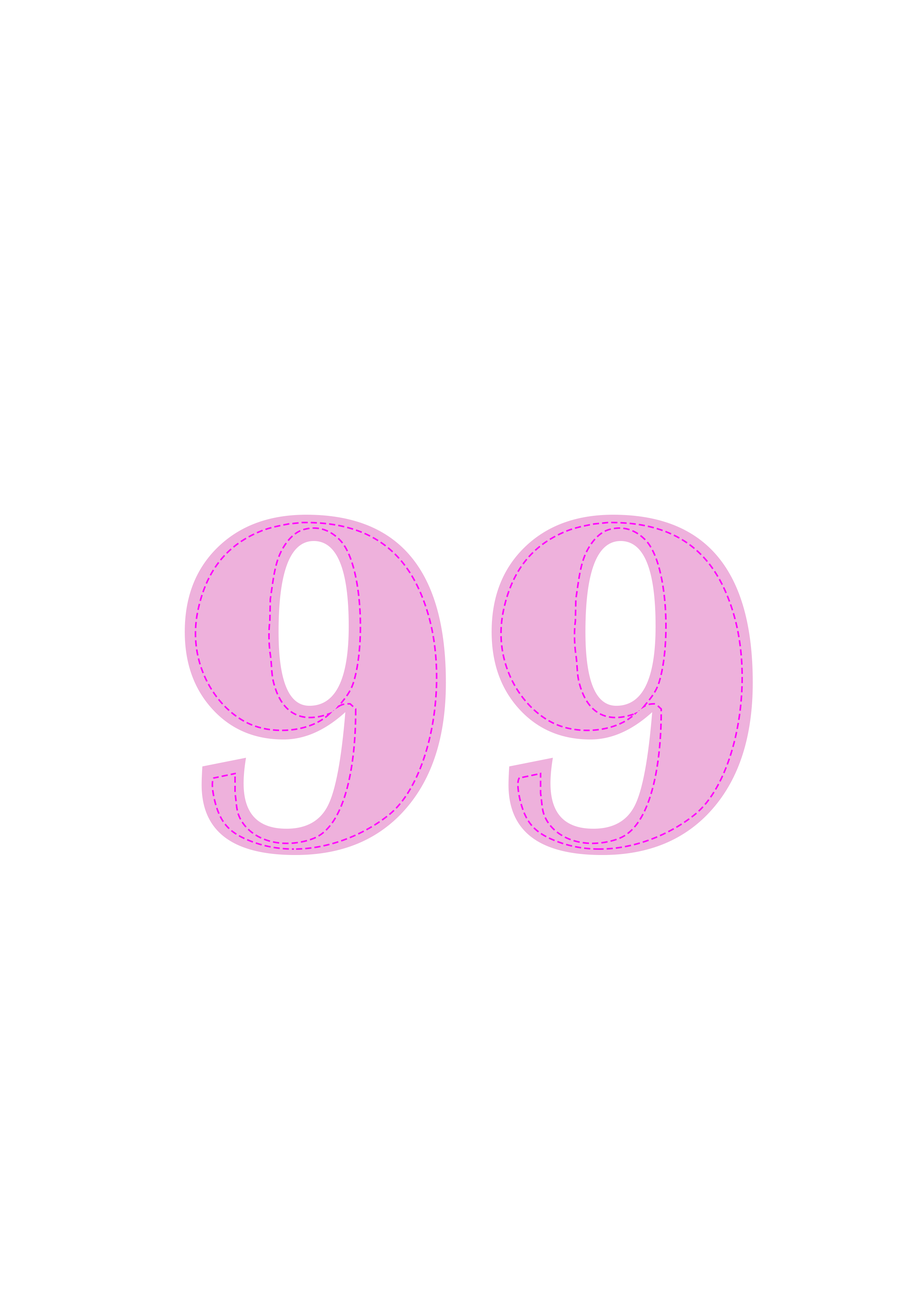
<style>
.page{position:relative;width:918px;height:1299px;background:#ffffff}
.page>*{position:absolute;margin:0}
.t1{font:493.7px "BritannicBold";letter-spacing:0.01em;color:#eeb1dc}
</style>
<div class="page">
<p class="t1" style="left:185px;top:515px;width:568px;height:340px">99</p>
</div>
